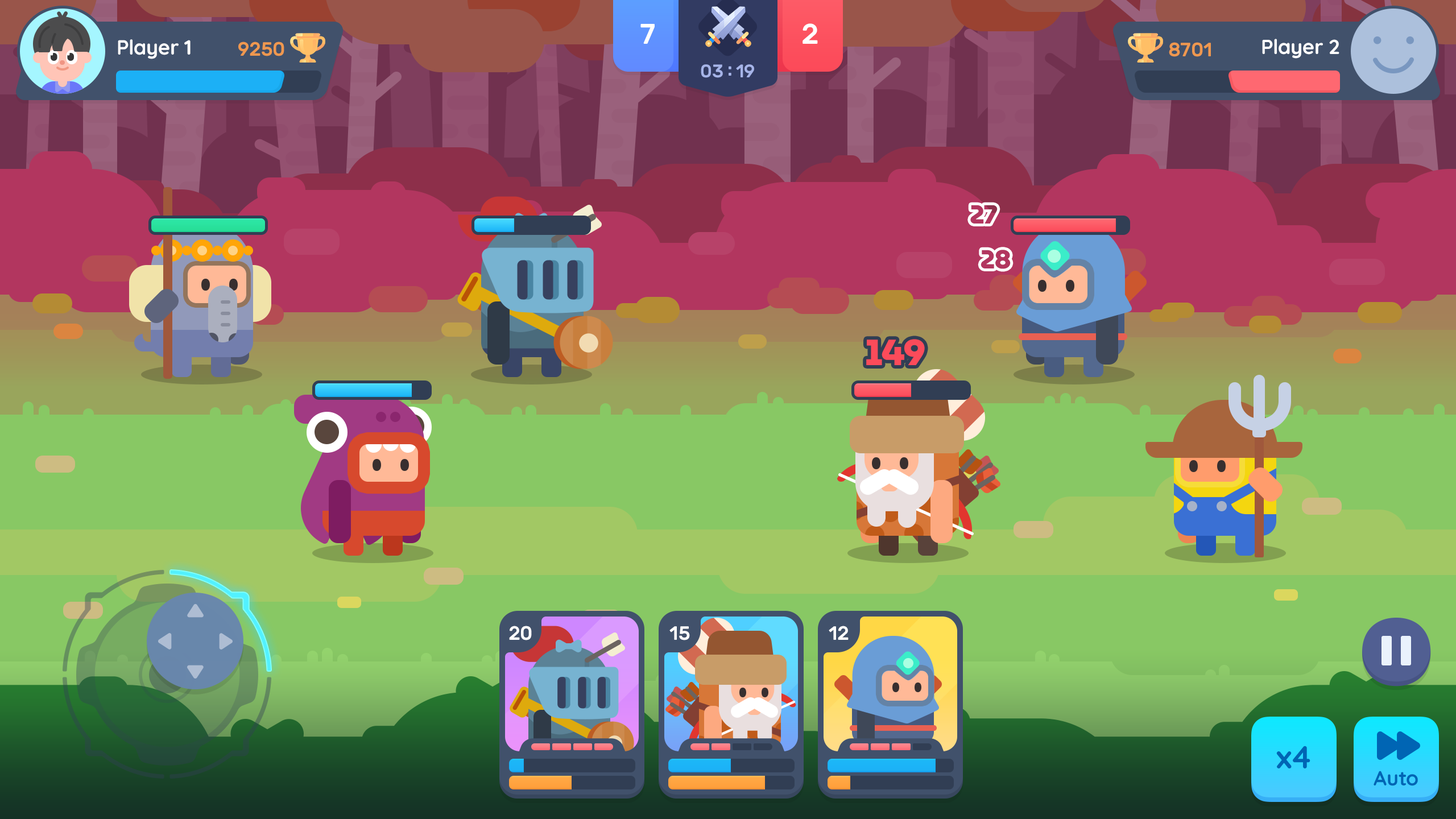
<style>
.page{position:relative;width:1456px;height:819px}
.page>*{position:absolute;margin:0}
.t1{font:28.4px "Rubik-Medium";letter-spacing:-0.01em;color:#ffffff}
.t2{font:20.5px "Quicksand-Bold";letter-spacing:-0.01em;color:#ffffff}
.t3{font:19.3px "Rubik-Medium";letter-spacing:-0.01em;color:#ef984f}
.t4{font:20.4px "Quicksand-Bold";letter-spacing:-0.01em;color:#ffffff}
.t5{font:18.2px "Rubik-Medium";letter-spacing:-0.01em;color:#a6b4e8}
.t6{font:26.2px "MuseoModerno-ExtraBold";letter-spacing:-0.025em;color:#b2365f}
.t7{font:36.4px "MuseoModerno-ExtraBold";letter-spacing:-0.025em;color:#fc4b5a}
.t8{font:19.3px "Rubik-Medium";letter-spacing:-0.01em;color:#ffffff}
.t9{font:31.8px "Quicksand-Bold";letter-spacing:-0.01em;color:#0065b4}
.t10{font:20.5px "Quicksand-Bold";letter-spacing:-0.01em;color:#0065b4}
</style>
<div class="page">
<p class="t1" style="left:640px;top:24px;width:15px;height:20px">7</p>
<p class="t1" style="left:802px;top:23px;width:16px;height:21px">2</p>
<p class="t2" style="left:118px;top:39px;width:73px;height:20px">Player 1</p>
<p class="t3" style="left:238px;top:42px;width:46px;height:14px">9250</p>
<p class="t4" style="left:1262px;top:39px;width:77px;height:20px">Player 2</p>
<p class="t3" style="left:1169px;top:42px;width:42px;height:15px">8701</p>
<p class="t5" style="left:701px;top:64px;width:53px;height:14px">03 : 19</p>
<p class="t6" style="left:970px;top:205px;width:28px;height:19px">27</p>
<p class="t6" style="left:981px;top:250px;width:30px;height:19px">28</p>
<p class="t7" style="left:866px;top:339px;width:59px;height:26px">149</p>
<p class="t8" style="left:509px;top:626px;width:23px;height:14px">20</p>
<p class="t8" style="left:669px;top:626px;width:21px;height:14px">15</p>
<p class="t8" style="left:829px;top:626px;width:20px;height:14px">12</p>
<p class="t9" style="left:1276px;top:746px;width:34px;height:22px">x4</p>
<p class="t10" style="left:1374px;top:771px;width:44px;height:15px">Auto</p>
</div>
